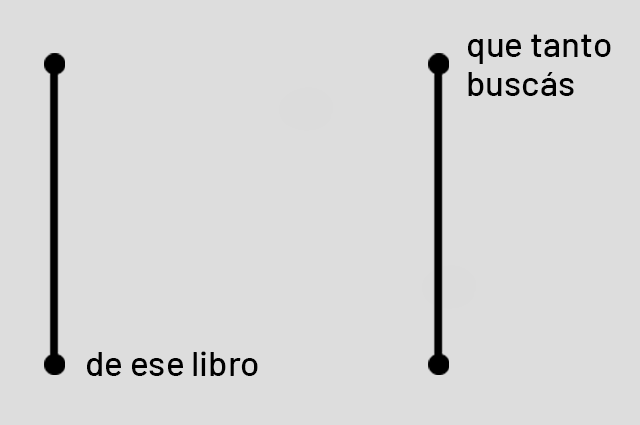
<style>
.page{position:relative;width:640px;height:425px;background:#dddddd}
.page>*{position:absolute;margin:0}
.t1{font:34.9px/39.3px "Barlow-Medium";color:#000000}
.t2{font:34.9px "Barlow-Medium";color:#000000}
</style>
<div class="page">
<p class="t1" style="left:468px;top:34px;width:143px;height:62px">que tanto<br>buscás</p>
<p class="t2" style="left:87px;top:351px;width:171px;height:25px">de ese libro</p>
</div>
